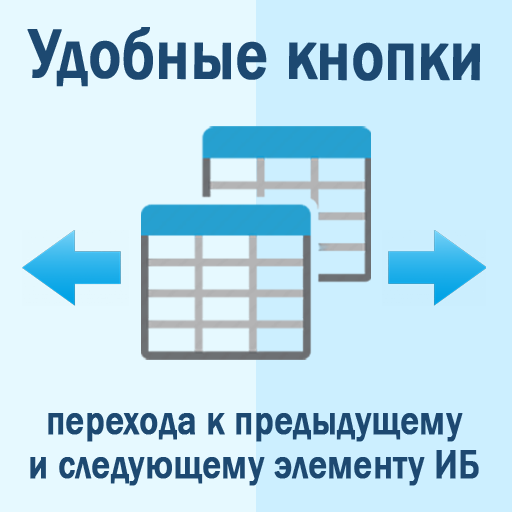
<style>
.page{position:relative;width:512px;height:512px;background:#ccefff}
.page>*{position:absolute;margin:0}
.t1{font:72px "FranklinGothic-Medium";color:#1d4971;font-weight:bold;scale:0.83 1}
.t2{font:42px/11.2px "FranklinGothic-Medium";color:#1d4971;font-weight:bold;scale:0.83 1}
</style>
<div class="page">
<p class="t1" style="left:27px;top:27px;width:453px;height:60px">Удобные кнопки</p>
<p class="t2" style="left:30px;top:413px;width:449px;height:73px;text-align:center">перехода к предыдущему<br><br><br><br>и следующему элементу ИБ</p>
</div>
